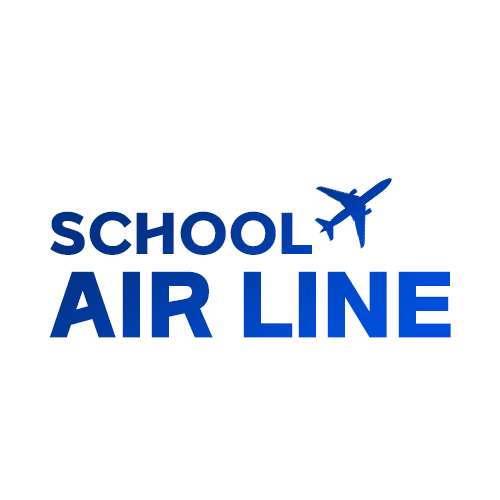
<style>
.page{position:relative;width:500px;height:500px;background:#ffffff}
.page>*{position:absolute;margin:0}
.t1{font:82.4px/80px "SBAggroB"}
.t2{font:51.8px/80px "SBAggroB"}
</style>
<div class="page">
<p class="t1" style="left:49px;top:211px;width:402px;height:127px"><span class="t2">SCHOOL<br></span>AIR LINE</p>
</div>
